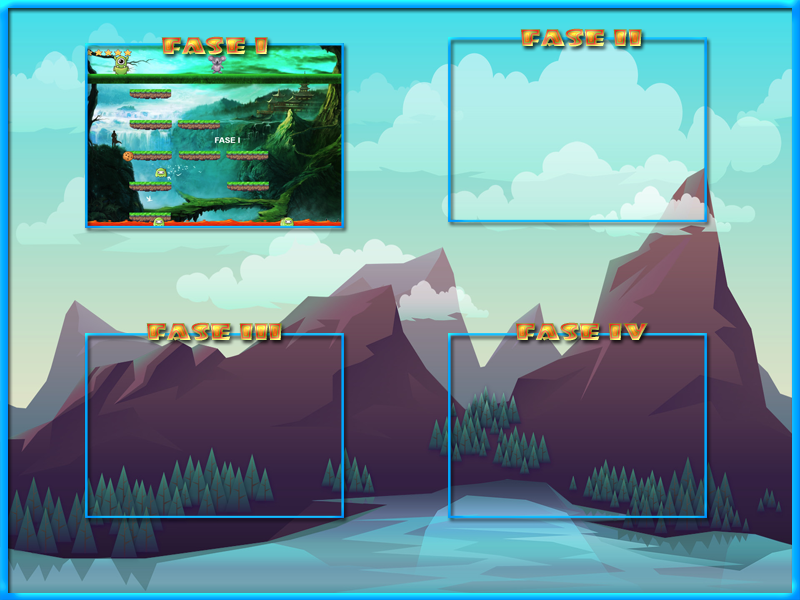
<style>
.page{position:relative;width:800px;height:600px}
.page>*{position:absolute;margin:0}
.t1{font:22.3px "ShowcardGothic-Reg";scale:1.73 1}
</style>
<div class="page">
<p class="t1" style="left:520px;top:28px;width:122px;height:19px">FASE II</p>
<p class="t1" style="left:161px;top:36px;width:107px;height:19px">Fase I</p>
<p class="t1" style="left:146px;top:322px;width:136px;height:19px">FASE III</p>
<p class="t1" style="left:515px;top:322px;width:133px;height:19px">FASE IV</p>
</div>
